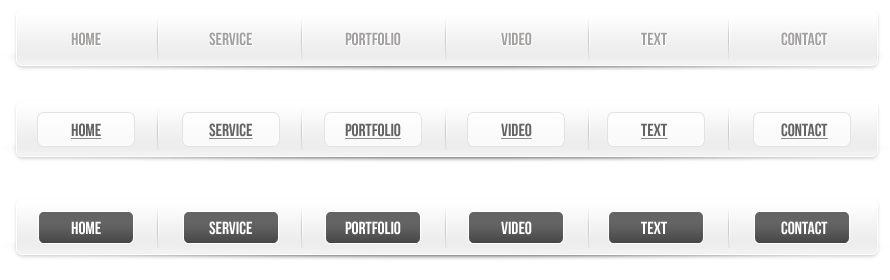
<style>
.page{position:relative;width:890px;height:280px;background:#ffffff}
.page>*{position:absolute;margin:0}
.t1{font:17.4px "BebasNeue";color:#a3a0a0}
.t2{font:17.4px "BebasNeue";color:#646464;text-transform:uppercase;text-decoration:underline}
.t3{font:17.4px "BebasNeue";color:#646464;text-decoration:underline}
.t4{font:17.4px "BebasNeue";color:#ffffff}
</style>
<div class="page">
<p class="t1" style="left:71px;top:32px;width:30px;height:14px">HOME</p>
<p class="t1" style="left:209px;top:32px;width:43px;height:14px">SERVICE</p>
<p class="t1" style="left:345px;top:32px;width:56px;height:14px">PORTFOLIO</p>
<p class="t1" style="left:501px;top:32px;width:31px;height:14px">VIDEO</p>
<p class="t1" style="left:641px;top:32px;width:26px;height:13px">TEXT</p>
<p class="t1" style="left:781px;top:32px;width:47px;height:14px">CONTACT</p>
<p class="t2" style="left:71px;top:123px;width:31px;height:16px">HOME</p>
<p class="t3" style="left:209px;top:123px;width:44px;height:16px">SERVICE</p>
<p class="t3" style="left:345px;top:123px;width:56px;height:16px">PORTFOLIO</p>
<p class="t3" style="left:501px;top:123px;width:31px;height:16px">VIDEO</p>
<p class="t3" style="left:641px;top:123px;width:27px;height:16px">TEXT</p>
<p class="t3" style="left:781px;top:123px;width:47px;height:16px">CONTACT</p>
<p class="t4" style="left:71px;top:221px;width:30px;height:14px">HOME</p>
<p class="t4" style="left:209px;top:221px;width:43px;height:14px">SERVICE</p>
<p class="t4" style="left:345px;top:221px;width:56px;height:14px">PORTFOLIO</p>
<p class="t4" style="left:501px;top:221px;width:31px;height:14px">VIDEO</p>
<p class="t4" style="left:641px;top:221px;width:26px;height:13px">TEXT</p>
<p class="t4" style="left:781px;top:221px;width:47px;height:14px">CONTACT</p>
</div>
